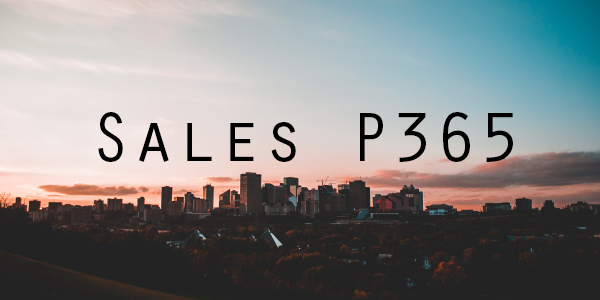
<style>
.page{position:relative;width:600px;height:300px}
.page>*{position:absolute;margin:0}
.t1{font:72px "OratorStd";color:#000000}
</style>
<div class="page">
<p class="t1" style="left:98px;top:112px;width:415px;height:50px">Sales P365</p>
</div>
